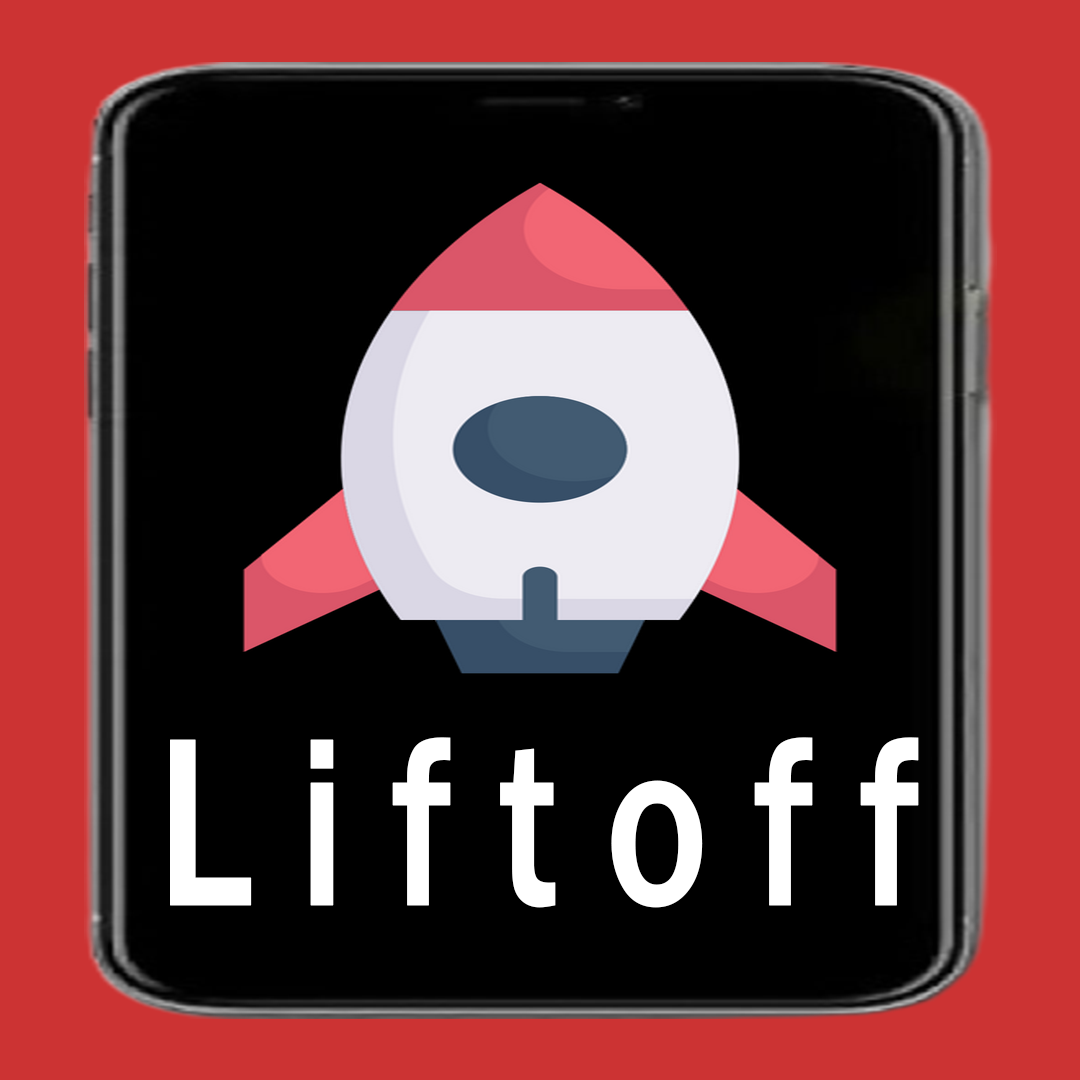
<style>
.page{position:relative;width:1080px;height:1080px;background:#000000}
.page>*{position:absolute;margin:0}
.t1{font:247.6px "FranklinGothic-Medium";letter-spacing:0.2em;color:#ffffff;font-weight:bold;scale:0.79 1}
</style>
<div class="page">
<p class="t1" style="left:170px;top:737px;width:749px;height:171px">Liftoff</p>
</div>
